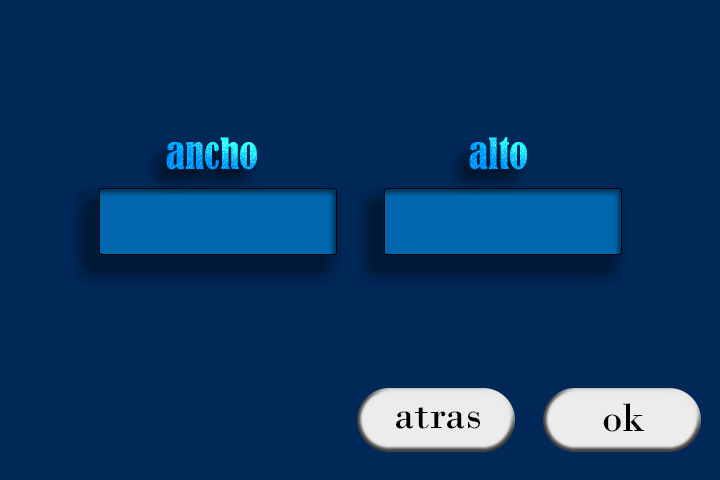
<style>
.page{position:relative;width:720px;height:480px;background:#002858}
.page>*{position:absolute;margin:0}
.t1{font:40px "BernardMT-Condensed"}
.t2{font:42px "BodoniMT";color:#000000}
.t3{font:41.6px "BodoniMT";color:#000000}
</style>
<div class="page">
<p class="t1" style="left:166px;top:137px;width:91px;height:33px">ancho</p>
<p class="t1" style="left:469px;top:137px;width:58px;height:33px">alto</p>
<p class="t2" style="left:396px;top:407px;width:84px;height:22px">atras</p>
<p class="t3" style="left:603px;top:403px;width:41px;height:29px">ok</p>
</div>
